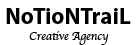
<style>
.page{position:relative;width:136px;height:45px;background:#ffffff}
.page>*{position:absolute;margin:0}
.t1{font:23px "MyriadPro-Bold";color:#000000}
.t2{font:12px "Apple-Chancery";color:#000000}
</style>
<div class="page">
<p class="t1" style="left:6px;top:8px;width:125px;height:16px">NoTioNTraiL</p>
<p class="t2" style="left:29px;top:31px;width:80px;height:14px">Creative Agency</p>
</div>
